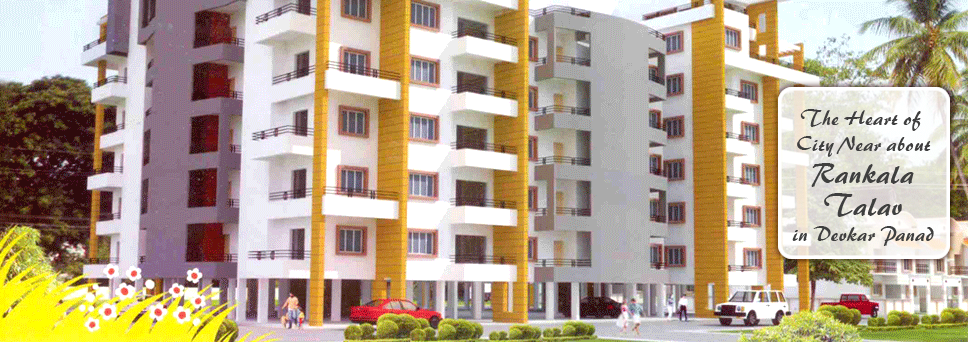
<style>
.page{position:relative;width:968px;height:342px}
.page>*{position:absolute;margin:0}
.t1{font:20.3px/26px "Brush445BT-Regular";letter-spacing:0.01em;color:#3f3f3f}
.t2{font:27.9px/26px "Brush445BT-Regular";letter-spacing:0.01em;color:#3f3f3f}
.t3{font:27.9px/32px "Brush445BT-Regular";letter-spacing:0.01em;color:#3f3f3f}
</style>
<div class="page">
<p class="t1" style="left:792px;top:109px;width:142px;height:137px;text-align:center">The Heart of <br>City Near about<br><span class="t2">R</span><span class="t3">ankala<br>Tal</span><span class="t2">av<br></span>in Devkar Panad</p>
</div>
